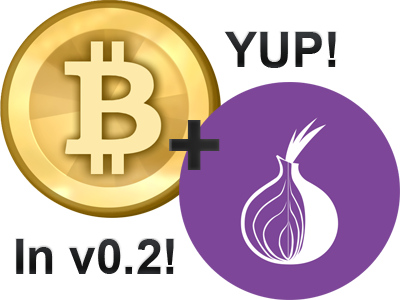
<style>
.page{position:relative;width:400px;height:300px;background:#ffffff}
.page>*{position:absolute;margin:0}
.t1{font:48px "Arial-BoldMT";color:#222325}
.t2{font:100px "Arial-BoldMT";color:#282828}
.t3{font:48px "Arial-BoldMT";color:#1e1f20}
</style>
<div class="page">
<p class="t1" style="left:225px;top:32px;width:111px;height:36px">YUP!</p>
<p class="t2" style="left:169px;top:120px;width:51px;height:50px">+</p>
<p class="t3" style="left:16px;top:239px;width:158px;height:35px">In v0.2!</p>
</div>
